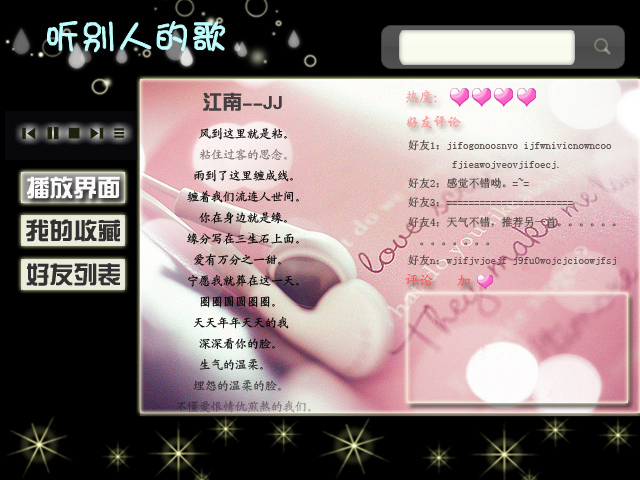
<style>
.page{position:relative;width:640px;height:480px;background:#000000}
.page>*{position:absolute;margin:0}
.t1{font:12px "KaiTi_GB2312";color:#020202}
.t2{font:18px "KaiTi_GB2312";color:#fbf9f9}
.t3{font:20px "FZZYFW--GB1-0";color:#443f3f}
.t4{font:18px "FZZYFW--GB1-0";color:#443f3f}
.t5{font:12px "KaiTi_GB2312";color:#827373}
.t6{font:14px "KaiTi_GB2312";color:#f69f9f}
.t7{font:14px "CTXingKaiSJ";color:#f89f9f}
.t8{font:11px "SimSun";color:#5d5050}
.t9{font:14px "CTXingKaiSJ";color:#f49090}
.t10{font:24px "CTZongYiSF";color:#fbf9f9}
.t11{font:24px "CTZongYiSF";color:#323030}
.t12{font:14px "KaiTi_GB2312";color:#f35c5c}
</style>
<div class="page">
<p class="t1" style="left:176px;top:92px;width:135px;height:321px"><span class="t2">         </span><span class="t3">江南</span><span class="t4">--JJ<br></span>             风到这里就是粘。<br>             <span class="t5">粘住过客的思念。<br></span> 　　       雨到了这里缠成线。<br>　         缠着我们流连人世间。 　<br>　           你在身边就是缘。 　<br>　         缘分写在三生石上面。 　<br>　          爱有万分之一甜。 　<br>         　宁愿我就葬在这一天。 <br>　         　圈圈圆圆圈圈。 　　<br>            天天年年天天的我<br>             深深看你的脸。 　<br>　           生气的温柔。 　<br>　          埋怨的温柔的脸。 <br>　　     不懂爱恨情仇煎熬的我们。</p>
<p class="t6" style="left:405px;top:90px;width:32px;height:13px">热度：</p>
<p class="t7" style="left:406px;top:115px;width:55px;height:14px">好友评论</p>
<p class="t8" style="left:408px;top:140px;width:209px;height:126px"><span class="t9"><br></span>好友1：jifogonoosnvo ijfwnivicnowncoo<br>        fjieawojveovjifoecj.<br>好友2：感觉不错呦。=~=<br>好友3：=======================<br>好友4：天气不错，推荐另一首。。。。。。<br>  。。。。。。。   <br>好友n：wjifjvjoejf j9fu0wojcjcioowjfsj</p>
<p class="t10" style="left:27px;top:176px;width:93px;height:23px">播放界面</p>
<p class="t11" style="left:26px;top:219px;width:94px;height:23px">我的收藏</p>
<p class="t11" style="left:26px;top:263px;width:94px;height:23px">好友列表</p>
<p class="t12" style="left:405px;top:274px;width:28px;height:13px">评论</p>
<p class="t12" style="left:457px;top:275px;width:13px;height:11px">加</p>
</div>
